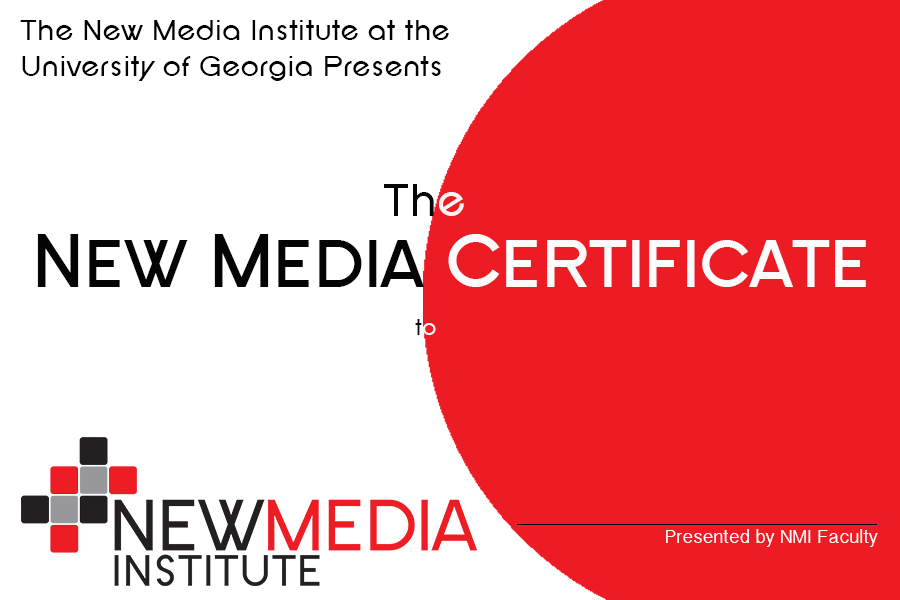
<style>
.page{position:relative;width:900px;height:600px;background:#ffffff}
.page>*{position:absolute;margin:0}
.t1{font:29.9px "SFNewRepublic";color:#000000}
.t2{font:48px "SFNewRepublic";color:#060606}
.t3{font:48px "SFNewRepublic";color:#faf6f6}
.t4{font:77.7px "SFNewRepublicSC-Bold";color:#fdfcfc}
.t5{font:77.7px "SFNewRepublicSC-Bold";color:#040404}
.t6{font:24px "SFNewRepublic";color:#0b0b0b}
.t7{font:24px "SFNewRepublic";color:#fbf8f8}
.t8{font:18px "TeluguSangamMN";color:#fdfcfc}
</style>
<div class="page">
<p class="t1" style="left:20px;top:20px;width:429px;height:61px">The New Media Institute at the <br>University of Georgia Presents</p>
<p class="t2" style="left:384px;top:184px;width:80px;height:32px">Th<span class="t3">e</span></p>
<p class="t4" style="left:37px;top:234px;width:829px;height:53px"><span class="t5">New Media </span>Certificate</p>
<p class="t6" style="left:415px;top:319px;width:21px;height:16px">t<span class="t7">o</span></p>
<p class="t8" style="left:666px;top:529px;width:212px;height:18px">Presented by NMI Faculty</p>
</div>
